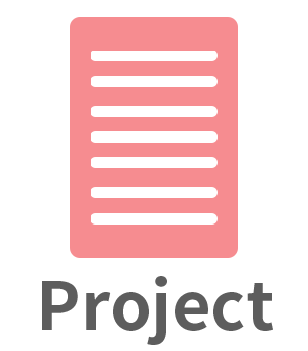
<style>
.page{position:relative;width:308px;height:351px;background:#ffffff}
.page>*{position:absolute;margin:0}
.t1{font:66.7px "NotoSansCJKkr-Bold";color:#5d5d5d}
</style>
<div class="page">
<p class="t1" style="left:42px;top:276px;width:231px;height:69px">Project</p>
</div>
